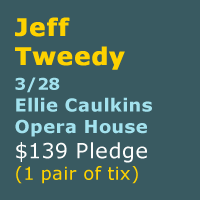
<style>
.page{position:relative;width:200px;height:200px;background:#395a61}
.page>*{position:absolute;margin:0}
.t1{font:18px "Verdana-Bold";letter-spacing:0.018em;color:#a3e2ee}
.t2{font:24px "Verdana-Bold";letter-spacing:0.018em;color:#fed200;font-weight:bold}
.t3{font:16px "Verdana-Bold";letter-spacing:0.018em;color:#a3e2ee}
.t4{font:21px "Verdana";letter-spacing:0.018em;color:#fdfdfc}
.t5{font:18px "Verdana";letter-spacing:0.018em;color:#fed200}
</style>
<div class="page">
<p class="t1" style="left:15px;top:17px;width:137px;height:167px"><span class="t2">Jeff <br>Tweedy<br></span><span class="t3">3/28 <br></span>Ellie Caulkins <br>Opera House<br><span class="t4">$139 Pledge<br></span><span class="t5">(1 pair of tix)</span></p>
</div>
